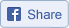
<style>
.page{position:relative;width:69px;height:28px;background:#eaeff9}
.page>*{position:absolute;margin:0}
.t1{font:13px "ArialMT";color:#3c5ca2}
</style>
<div class="page">
<p class="t1" style="left:28px;top:9px;width:34px;height:11px">Share</p>
</div>
